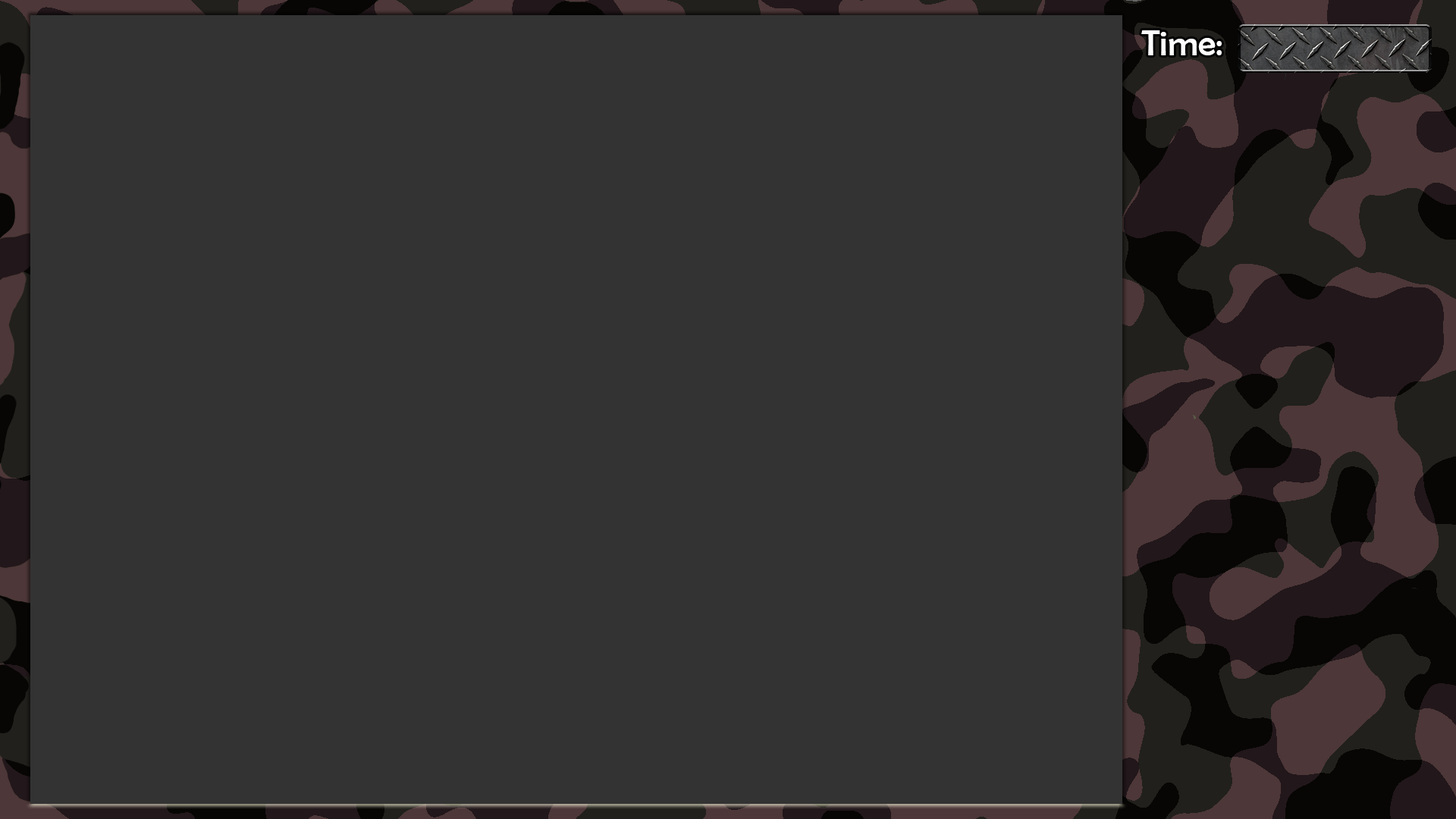
<style>
.page{position:relative;width:1456px;height:819px;background:#333333}
.page>*{position:absolute;margin:0}
.t1{font:36.4px "BerlinSansFB-Reg";color:#ffffff}
</style>
<div class="page">
<p class="t1" style="left:1141px;top:30px;width:81px;height:25px">Time:</p>
</div>
